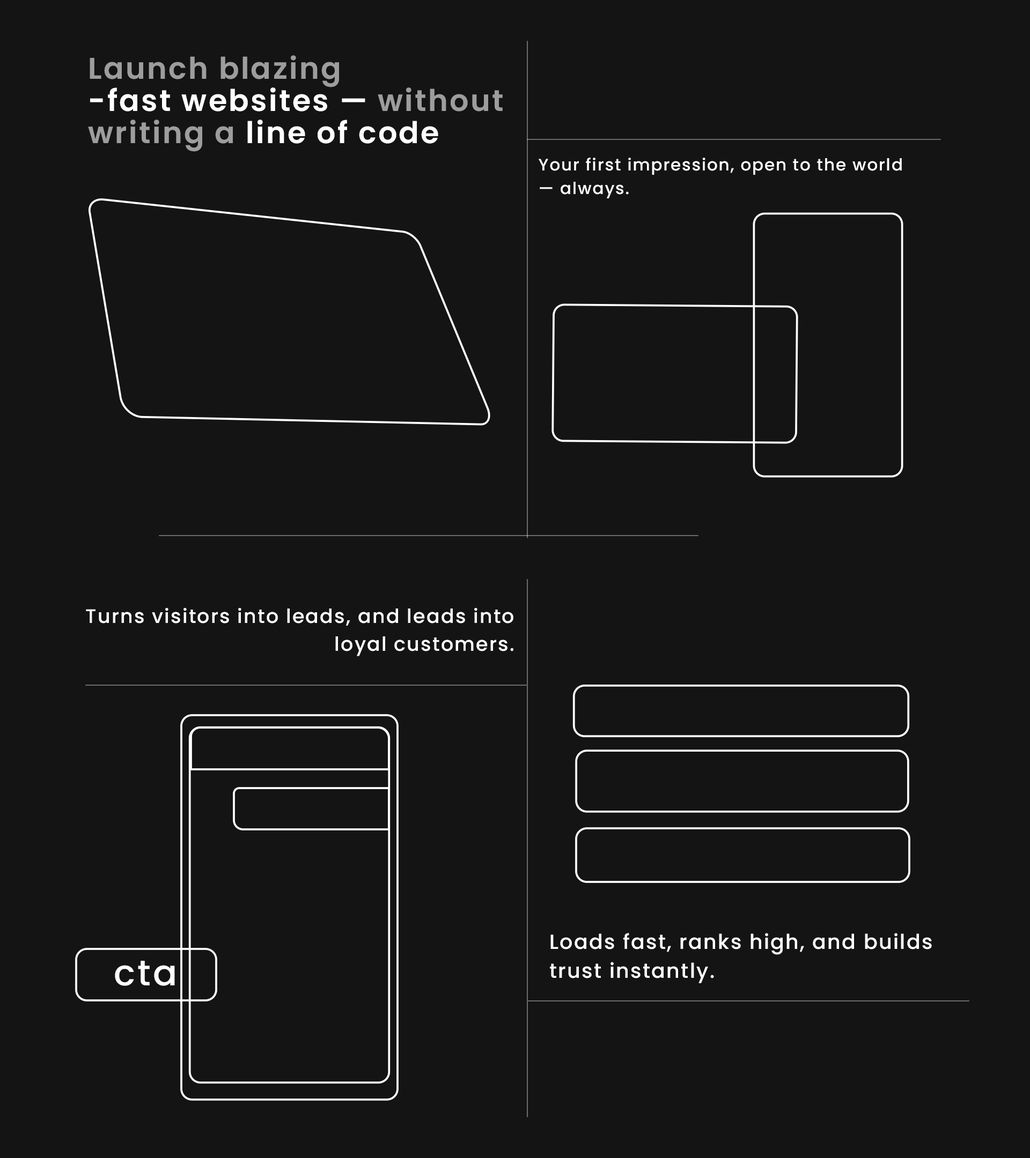
<style>
.page{position:relative;width:1030px;height:1158px;background:#141414}
.page>*{position:absolute;margin:0}
.t1{font:29.9px/32.2px "Poppins-SemiBold";letter-spacing:0.06em;color:#9d9d9d}
.t2{font:29.9px/32.2px "Poppins-SemiBold";letter-spacing:0.06em;color:#ffffff}
.t3{font:16.6px/23.6px "Poppins-Medium";letter-spacing:0.06em;color:#ffffff}
.t4{font:19.5px/27.7px "Poppins-Medium";letter-spacing:0.06em;color:#ffffff}
.t5{font:20.4px/29px "Poppins-Medium";letter-spacing:0.06em;color:#ffffff}
.t6{font:35.6px "Poppins-Medium";letter-spacing:0.06em;color:#ffffff}
</style>
<div class="page">
<p class="t1" style="left:88px;top:55px;width:414px;height:97px">Launch blazing<br><span class="t2">-fast websites — </span>without<br>writing a<span class="t2"> line of code</span></p>
<p class="t3" style="left:538px;top:158px;width:363px;height:40px">Your first impression, open to the world — always.</p>
<p class="t4" style="left:86px;top:608px;width:427px;height:48px;text-align:right">Turns visitors into leads, and leads into loyal customers.</p>
<p class="t5" style="left:550px;top:933px;width:381px;height:50px">Loads fast, ranks high, and builds trust instantly.</p>
<p class="t6" style="left:115px;top:961px;width:60px;height:25px">cta</p>
</div>
